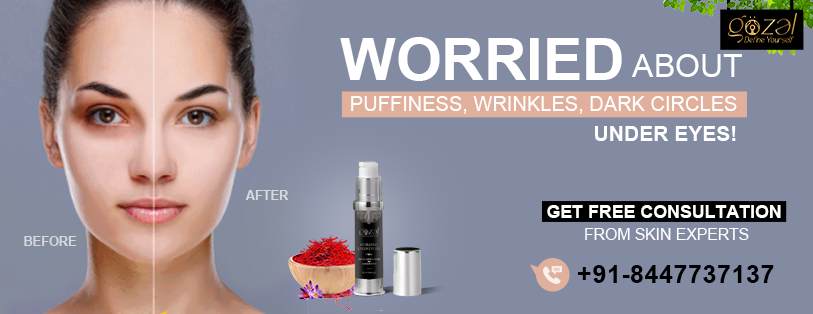
<style>
.page{position:relative;width:813px;height:314px;background:#838ba3}
.page>*{position:absolute;margin:0}
.t1{font:58.9px "Arial-BoldMT";color:#ffffff;text-transform:uppercase}
.t2{font:32.1px "ArialMT";color:#ffffff;text-transform:uppercase}
.t3{font:20px "ArialMT";color:#ffffff;text-transform:uppercase}
.t4{font:21px "Arial-BoldMT";color:#ffffff;text-transform:uppercase}
.t5{font:12.8px "Arial-BoldMT";color:#d7dadf;text-transform:uppercase}
.t6{font:17.8px/23.7px "Arial-BoldMT";color:#ffffff;text-transform:uppercase}
.t7{font:15.7px/23.7px "ArialMT";color:#ffffff;text-transform:uppercase}
.t8{font:12.8px "Arial-BoldMT";color:#d7d9de;text-transform:uppercase}
.t9{font:24.9px "Arial-BoldMT";letter-spacing:0.025em;color:#000000;text-transform:uppercase}
</style>
<div class="page">
<p class="t1" style="left:340px;top:37px;width:282px;height:44px">Worried</p>
<p class="t2" style="left:631px;top:54px;width:111px;height:23px">about</p>
<p class="t3" style="left:351px;top:96px;width:386px;height:18px">Puffiness, Wrinkles, Dark Circles</p>
<p class="t4" style="left:595px;top:126px;width:141px;height:15px">under eyes!</p>
<p class="t5" style="left:245px;top:190px;width:44px;height:10px">after</p>
<p class="t6" style="left:547px;top:205px;width:234px;height:35px;text-align:center">Get FREE Consultation <br><span class="t7">from SKIN EXPERTS</span></p>
<p class="t8" style="left:24px;top:236px;width:53px;height:10px">before</p>
<p class="t9" style="left:578px;top:265px;width:196px;height:18px">+91-8447737137</p>
</div>
